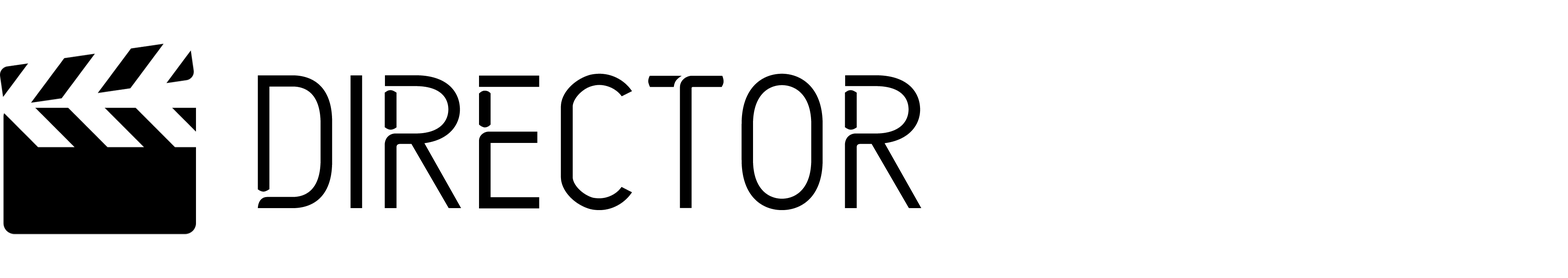
<style>
.page{position:relative;width:1568px;height:278px;background:#ffffff}
.page>*{position:absolute;margin:0}
.t1{font:188.2px "CapsuleXProMediumUC";letter-spacing:0.02em;color:#000000}
</style>
<div class="page">
<p class="t1" style="left:258px;top:73px;width:664px;height:137px">Director</p>
</div>
